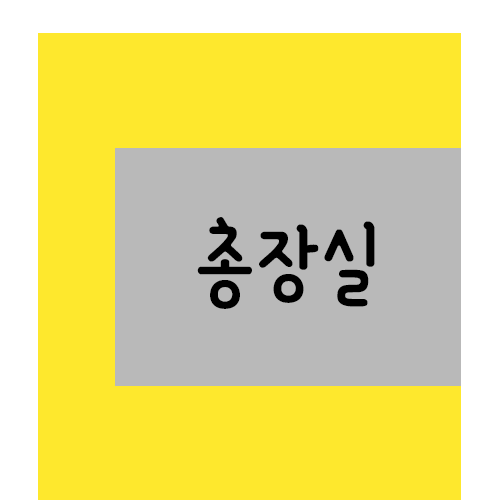
<style>
.page{position:relative;width:500px;height:500px;background:#fee82d}
.page>*{position:absolute;margin:0}
.t1{font:100px "YanoljaYacheR";color:#000000}
</style>
<div class="page">
<p class="t1" style="left:197px;top:217px;width:178px;height:92px">총장실</p>
</div>
